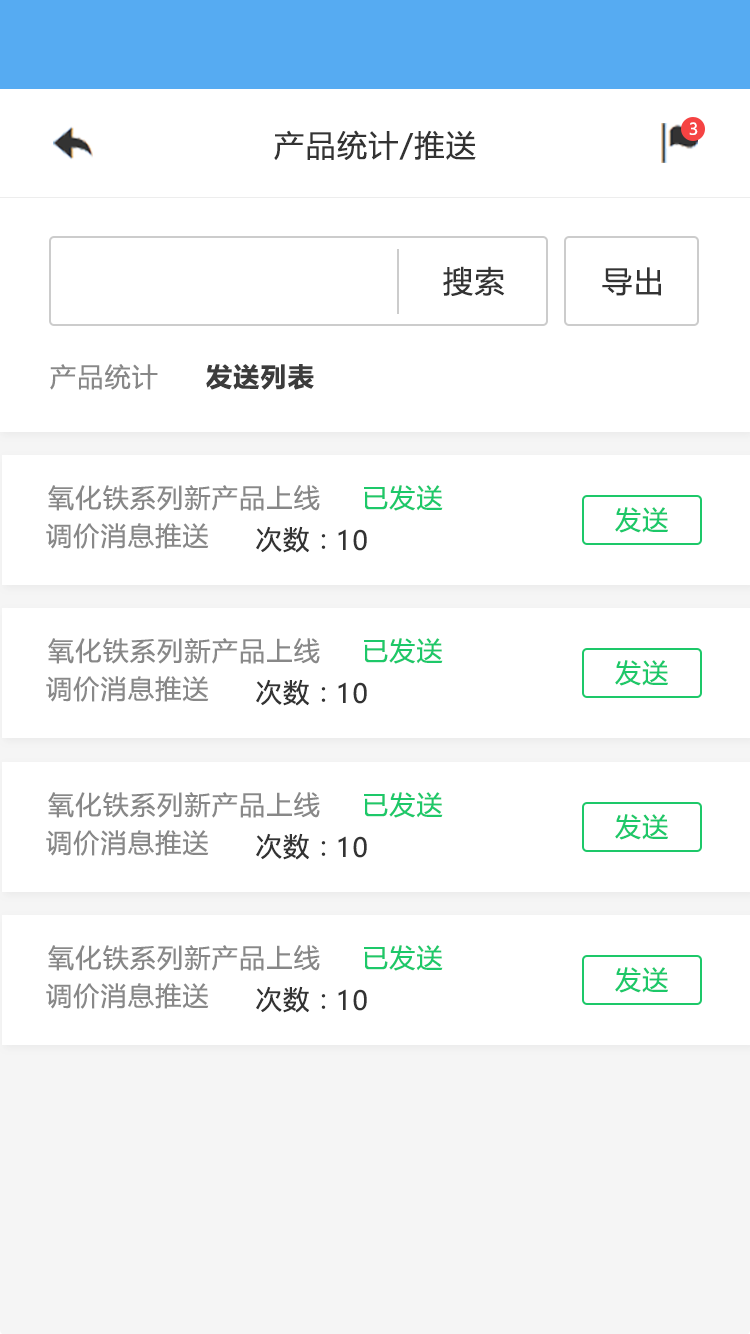
<style>
.page{position:relative;width:750px;height:1334px;background:#ffffff}
.page>*{position:absolute;margin:0}
.t1{font:16px "MicrosoftYaHeiUI";color:#ffffff}
.t2{font:30px "MicrosoftYaHeiUI";letter-spacing:0.05em;color:#333333}
.t3{font:26px "MicrosoftYaHeiUI";letter-spacing:0.05em;color:#888888}
.t4{font:26px "MicrosoftYaHeiUI-Bold";letter-spacing:0.05em;color:#3c3c3c}
.t5{font:26px "MicrosoftYaHeiUI";letter-spacing:0.05em;color:#1dc869}
.t6{font:26px "MicrosoftYaHeiUI";letter-spacing:0.05em;color:#333333}
</style>
<div class="page">
<p class="t1" style="left:689px;top:122px;width:9px;height:13px">3</p>
<p class="t2" style="left:274px;top:130px;width:202px;height:30px">产品统计/推送</p>
<p class="t2" style="left:443px;top:266px;width:62px;height:30px">搜索</p>
<p class="t2" style="left:602px;top:267px;width:59px;height:29px">导出</p>
<p class="t3" style="left:50px;top:364px;width:108px;height:26px">产品统计</p>
<p class="t4" style="left:206px;top:364px;width:108px;height:26px">发送列表</p>
<p class="t3" style="left:48px;top:485px;width:272px;height:26px">氧化铁系列新产品上线</p>
<p class="t5" style="left:364px;top:485px;width:79px;height:26px">已发送</p>
<p class="t5" style="left:615px;top:507px;width:53px;height:26px">发送</p>
<p class="t3" style="left:46px;top:523px;width:163px;height:26px">调价消息推送</p>
<p class="t6" style="left:256px;top:526px;width:70px;height:27px">次数：</p>
<p class="t6" style="left:338px;top:529px;width:29px;height:22px">10</p>
<p class="t3" style="left:48px;top:638px;width:272px;height:26px">氧化铁系列新产品上线</p>
<p class="t5" style="left:364px;top:638px;width:79px;height:26px">已发送</p>
<p class="t5" style="left:615px;top:660px;width:53px;height:26px">发送</p>
<p class="t3" style="left:46px;top:676px;width:163px;height:26px">调价消息推送</p>
<p class="t6" style="left:256px;top:679px;width:70px;height:27px">次数：</p>
<p class="t6" style="left:338px;top:682px;width:29px;height:22px">10</p>
<p class="t3" style="left:48px;top:792px;width:272px;height:26px">氧化铁系列新产品上线</p>
<p class="t5" style="left:364px;top:792px;width:79px;height:26px">已发送</p>
<p class="t5" style="left:615px;top:814px;width:53px;height:26px">发送</p>
<p class="t3" style="left:46px;top:830px;width:163px;height:26px">调价消息推送</p>
<p class="t6" style="left:256px;top:833px;width:70px;height:27px">次数：</p>
<p class="t6" style="left:338px;top:836px;width:29px;height:22px">10</p>
<p class="t3" style="left:48px;top:945px;width:272px;height:26px">氧化铁系列新产品上线</p>
<p class="t5" style="left:364px;top:945px;width:79px;height:26px">已发送</p>
<p class="t5" style="left:615px;top:967px;width:53px;height:26px">发送</p>
<p class="t3" style="left:46px;top:983px;width:163px;height:26px">调价消息推送</p>
<p class="t6" style="left:256px;top:986px;width:70px;height:27px">次数：</p>
<p class="t6" style="left:338px;top:989px;width:29px;height:22px">10</p>
</div>
